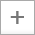
<style>
.page{position:relative;width:35px;height:35px;background:#ffffff}
.page>*{position:absolute;margin:0}
.t1{font:24px "NanumGothicBold";color:#777777}
</style>
<div class="page">
<p class="t1" style="left:10px;top:11px;width:14px;height:13px">+</p>
</div>
